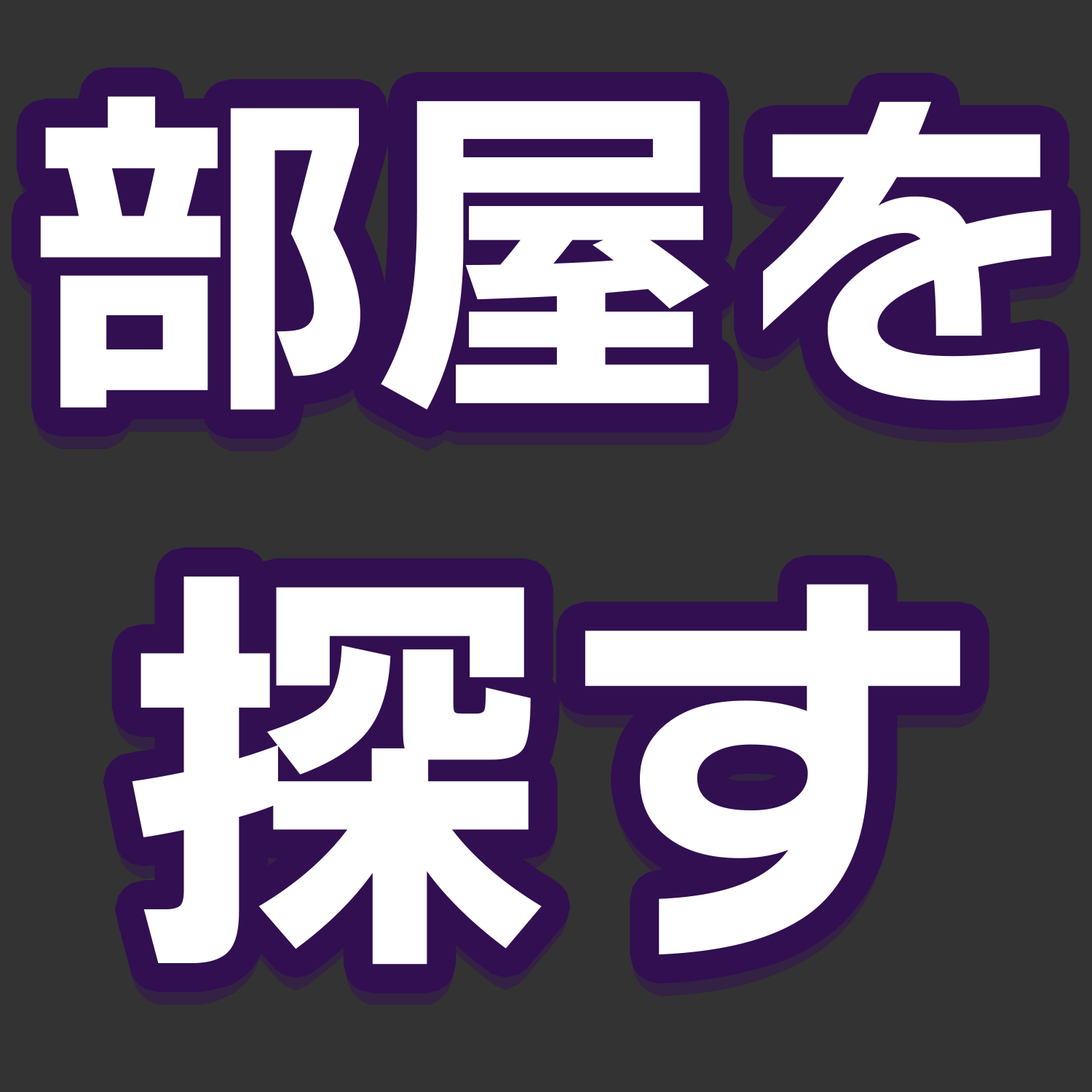
<style>
.page{position:relative;width:1092px;height:1092px;background:#333333}
.page>*{position:absolute;margin:0}
.t1{font:353.2px "NitalagoRuika-06";color:#ffffff}
.t2{font:433.8px "NitalagoRuika-06";color:#ffffff}
</style>
<div class="page">
<p class="t1" style="left:40px;top:96px;width:1012px;height:314px">部屋を</p>
<p class="t2" style="left:132px;top:576px;width:828px;height:389px">探す</p>
</div>
